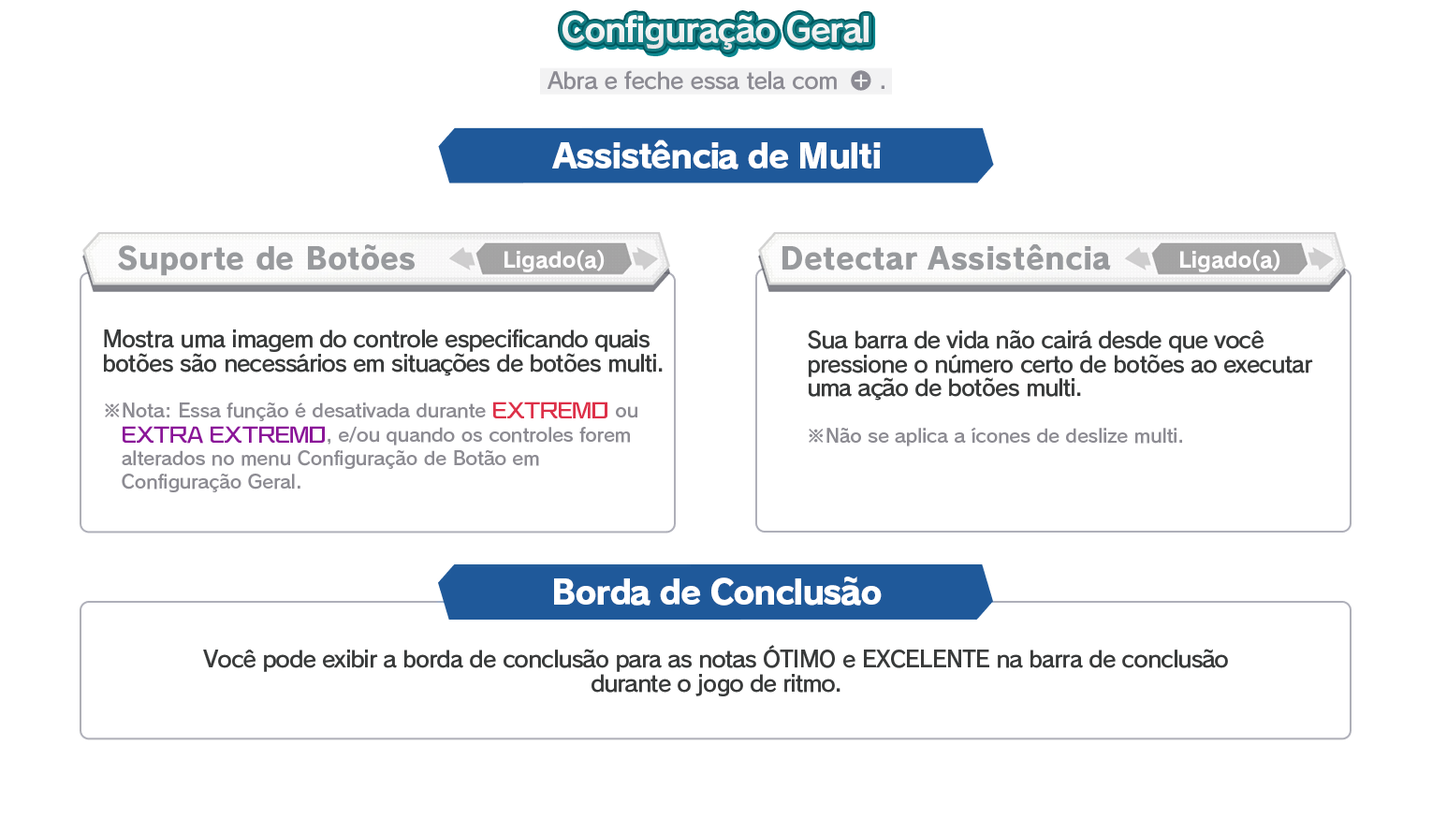
<style>
.page{position:relative;width:1432px;height:833px;background:#ffffff}
.page>*{position:absolute;margin:0}
.t1{font:33.7px "RodinPro-B";letter-spacing:-0.039em;color:#f2f3f3}
.t2{font:22.5px "RodinPro-DB";letter-spacing:-0.025em;color:#8c8b93}
.t3{font:33.7px "RodinPro-EB";letter-spacing:-0.048em;color:#ffffff}
.t4{font:29.9px "RodinPro-EB";letter-spacing:0.007em;color:#989a9d}
.t5{font:21.2px "RodinPro-B";color:#fefdfe}
.t6{font:22.5px/23.7px "RodinPro-DB";letter-spacing:-0.04em;color:#383a3a}
.t7{font:18.7px/23.7px "RodinPro-DB";letter-spacing:-0.014em;color:#8c8b92}
.t8{font:18.7px/23.7px "KafuTechnoStd-E";letter-spacing:-0.014em;color:#dd3048}
.t9{font:18.7px/23.7px "KafuTechnoStd-E";letter-spacing:-0.014em;color:#8a1598}
.t10{font:18.7px "RodinPro-DB";letter-spacing:-0.014em;color:#8c8b92}
</style>
<div class="page">
<p class="t1" style="left:562px;top:15px;width:306px;height:35px">Configuração Geral</p>
<p class="t2" style="left:547px;top:70px;width:290px;height:20px">Abra e feche essa tela com</p>
<p class="t2" style="left:881px;top:85px;width:3px;height:4px">.</p>
<p class="t3" style="left:552px;top:139px;width:329px;height:30px">Assistência de Multi</p>
<p class="t4" style="left:118px;top:244px;width:297px;height:32px">Suporte de Botões</p>
<p class="t4" style="left:782px;top:244px;width:329px;height:26px">Detectar Assistência</p>
<p class="t5" style="left:504px;top:249px;width:101px;height:23px">Ligado(a)</p>
<p class="t5" style="left:1180px;top:249px;width:100px;height:23px">Ligado(a)</p>
<p class="t6" style="left:104px;top:328px;width:559px;height:48px">Mostra uma imagem do controle especificando quais<br>botões são necessários em situações de botões multi.</p>
<p class="t6" style="left:808px;top:329px;width:505px;height:72px">Sua barra de vida não cairá desde que você<br>pressione o número certo de botões ao executar<br>uma ação de botões multi.</p>
<p class="t7" style="left:105px;top:401px;width:532px;height:91px">※Nota: Essa função é desativada durante <span class="t8">EXTREMO </span>ou<br>   <span class="t9">EXTRA EXTREMO</span>, e/ou quando os controles forem<br>   alterados no menu Configuração de Botão em<br>   Configuração Geral.</p>
<p class="t10" style="left:809px;top:427px;width:373px;height:19px">※Não se aplica a ícones de deslize multi.</p>
<p class="t3" style="left:554px;top:576px;width:328px;height:29px">Borda de Conclusão</p>
<p class="t6" style="left:203px;top:645px;width:1025px;height:51px;text-align:center">Você pode exibir a borda de conclusão para as notas ÓTIMO e EXCELENTE na barra de conclusão<br>durante o jogo de ritmo.</p>
</div>
